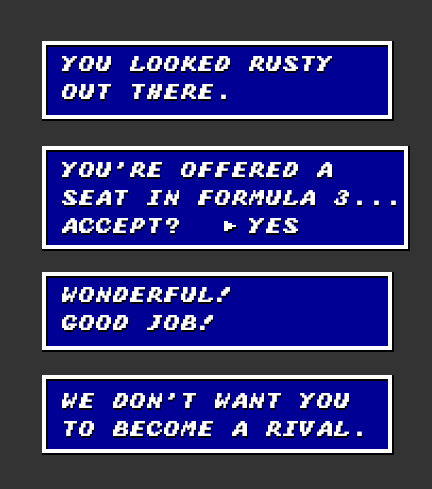
<style>
.page{position:relative;width:432px;height:489px;background:#333333}
.page>*{position:absolute;margin:0}
.t1{font:17px/28px "Super-Monaco-GP";color:#fefefe}
</style>
<div class="page">
<p class="t1" style="left:62px;top:56px;width:270px;height:43px">You looked rusty out there.</p>
<p class="t1" style="left:62px;top:162px;width:334px;height:71px">You're offered a<br>seat in formula 3...<br>accept?    Yes</p>
<p class="t1" style="left:62px;top:287px;width:168px;height:43px">wonderful!<br>good job!</p>
<p class="t1" style="left:62px;top:393px;width:300px;height:43px">We don't want you<br>to become a rival.</p>
</div>
